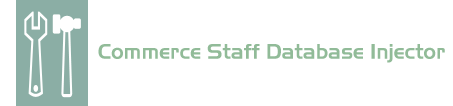
<style>
.page{position:relative;width:453px;height:106px;background:#ffffff}
.page>*{position:absolute;margin:0}
.t1{font:21px "Slicker";color:#91bb98}
</style>
<div class="page">
<p class="t1" style="left:98px;top:44px;width:347px;height:19px">Commerce Staff Database Injector</p>
</div>
